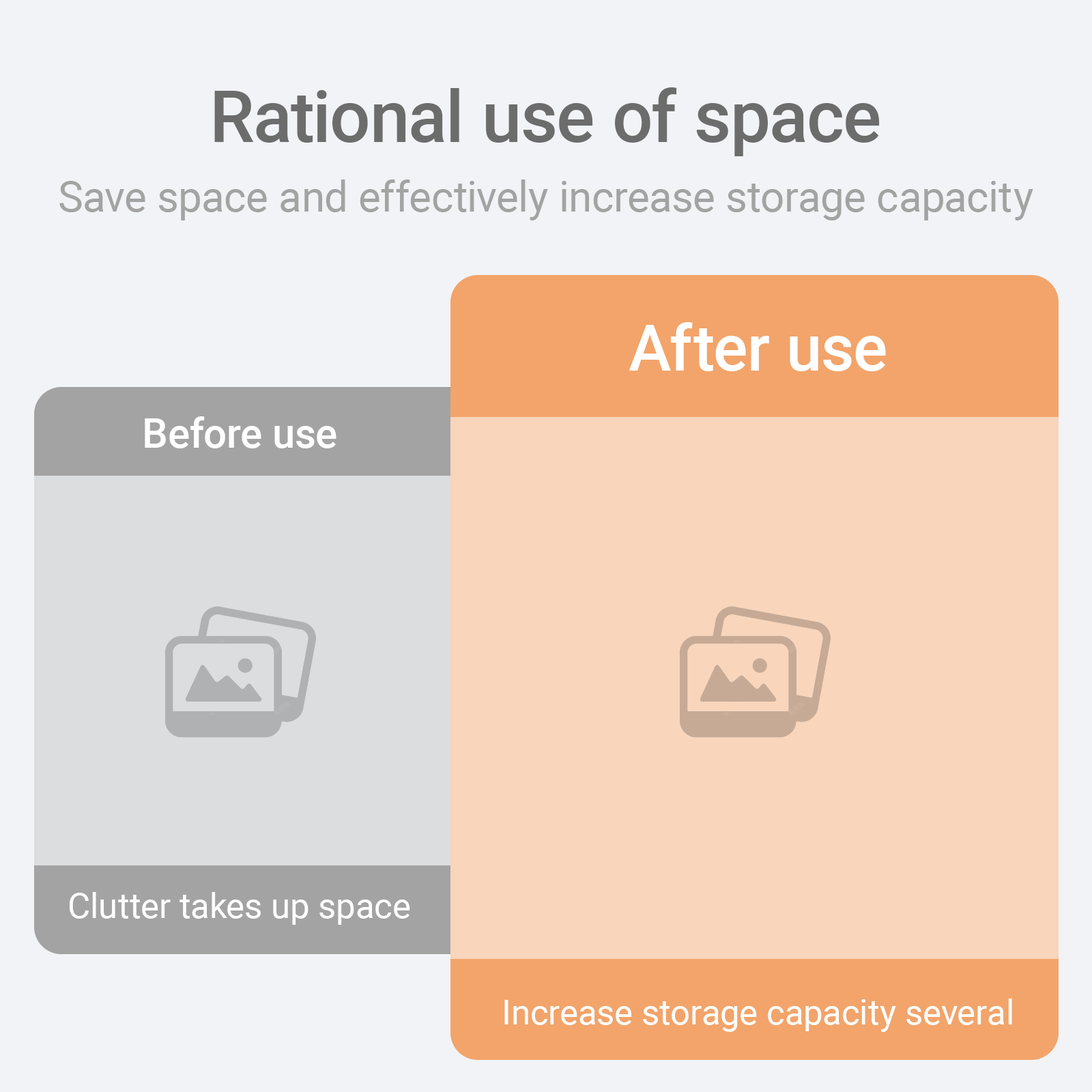
<style>
.page{position:relative;width:1092px;height:1092px;background:#f2f3f6}
.page>*{position:absolute;margin:0}
.t1{font:71.3px "Roboto-Medium";color:#6c6c6c}
.t2{font:42.2px "Roboto-Regular";color:#a3a3a3}
.t3{font:64.1px "Roboto-Medium";color:#ffffff}
.t4{font:40.8px "Roboto-Medium";color:#ffffff}
.t5{font:40.8px "Roboto-Medium";color:#ffffff;text-transform:uppercase}
.t6{font:34.9px "Roboto-Regular";color:#ffffff}
</style>
<div class="page">
<p class="t1" style="left:214px;top:87px;width:666px;height:69px">Rational use of space</p>
<p class="t2" style="left:59px;top:179px;width:974px;height:41px">Save space and effectively increase storage capacity</p>
<p class="t3" style="left:629px;top:322px;width:257px;height:49px">After use</p>
<p class="t4" style="left:145px;top:416px;width:191px;height:32px"><span class="t5">b</span>efore use</p>
<p class="t6" style="left:70px;top:892px;width:340px;height:33px">Clutter takes up space</p>
<p class="t6" style="left:504px;top:998px;width:508px;height:34px">Increase storage capacity several</p>
</div>
